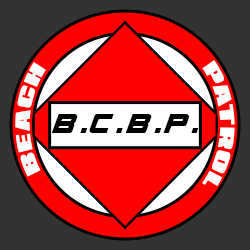
<style>
.page{position:relative;width:250px;height:250px;background:#333333}
.page>*{position:absolute;margin:0}
.t1{font:17.1px "RepublicaMinor2.0";letter-spacing:0.066em;color:#ffffff}
.t2{font:24.4px "Supreme";letter-spacing:0.066em;color:#000000}
</style>
<div class="page">
<p class="t1" style="left:15px;top:62px;width:31px;height:115px;rotate:-177deg">BEACH</p>
<p class="t1" style="left:202px;top:60px;width:33px;height:126px;text-align:center">PATROL</p>
<p class="t2" style="left:51px;top:114px;width:148px;height:19px">B.C.B.P.</p>
</div>
